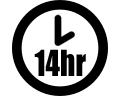
<style>
.page{position:relative;width:120px;height:96px;background:#ffffff}
.page>*{position:absolute;margin:0}
.t1{font:33.4px "Impact";color:#000000;scale:0.87 1}
</style>
<div class="page">
<p class="t1" style="left:34px;top:49px;width:52px;height:27px">14hr</p>
</div>
